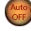
<style>
.page{position:relative;width:31px;height:31px;background:#ffffff}
.page>*{position:absolute;margin:0}
.t1{font:8px "LaoUI";color:#9c1c0b}
</style>
<div class="page">
<p class="t1" style="left:10px;top:4px;width:18px;height:17px;text-align:center">Auto<br>OFF</p>
</div>
